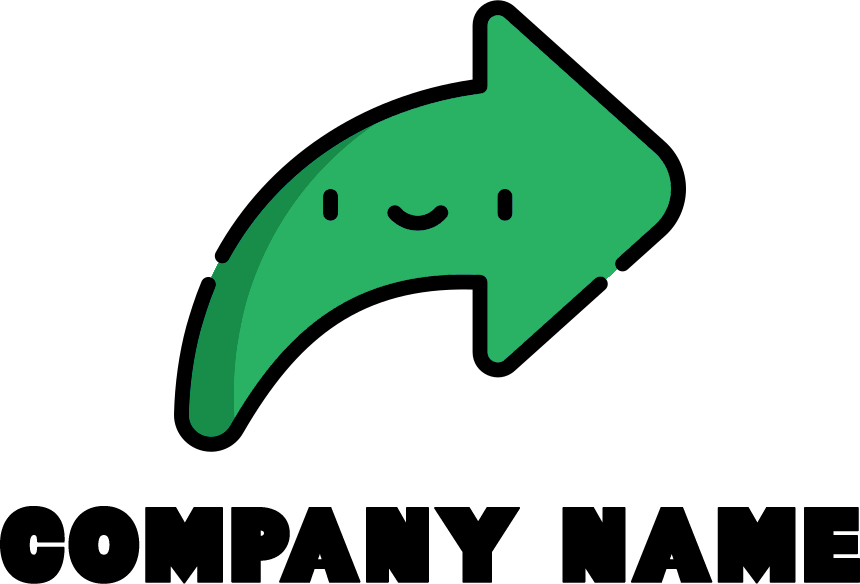
<style>
.page{position:relative;width:860px;height:584px;background:#ffffff}
.page>*{position:absolute;margin:0}
.t1{font:105.2px "Baltar-Regular";color:#000000;font-weight:bold}
</style>
<div class="page">
<p class="t1" style="left:0px;top:506px;width:860px;height:78px">COMPANY NAME</p>
</div>
